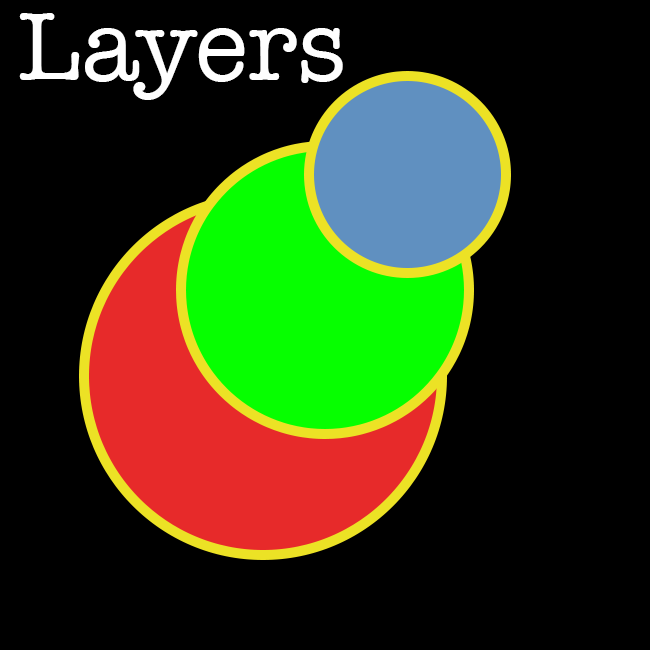
<style>
.page{position:relative;width:650px;height:650px;background:#000000}
.page>*{position:absolute;margin:0}
.t1{font:100px "AmericanTypewriter";color:#fefefe}
</style>
<div class="page">
<p class="t1" style="left:19px;top:13px;width:324px;height:87px">Layers</p>
</div>
